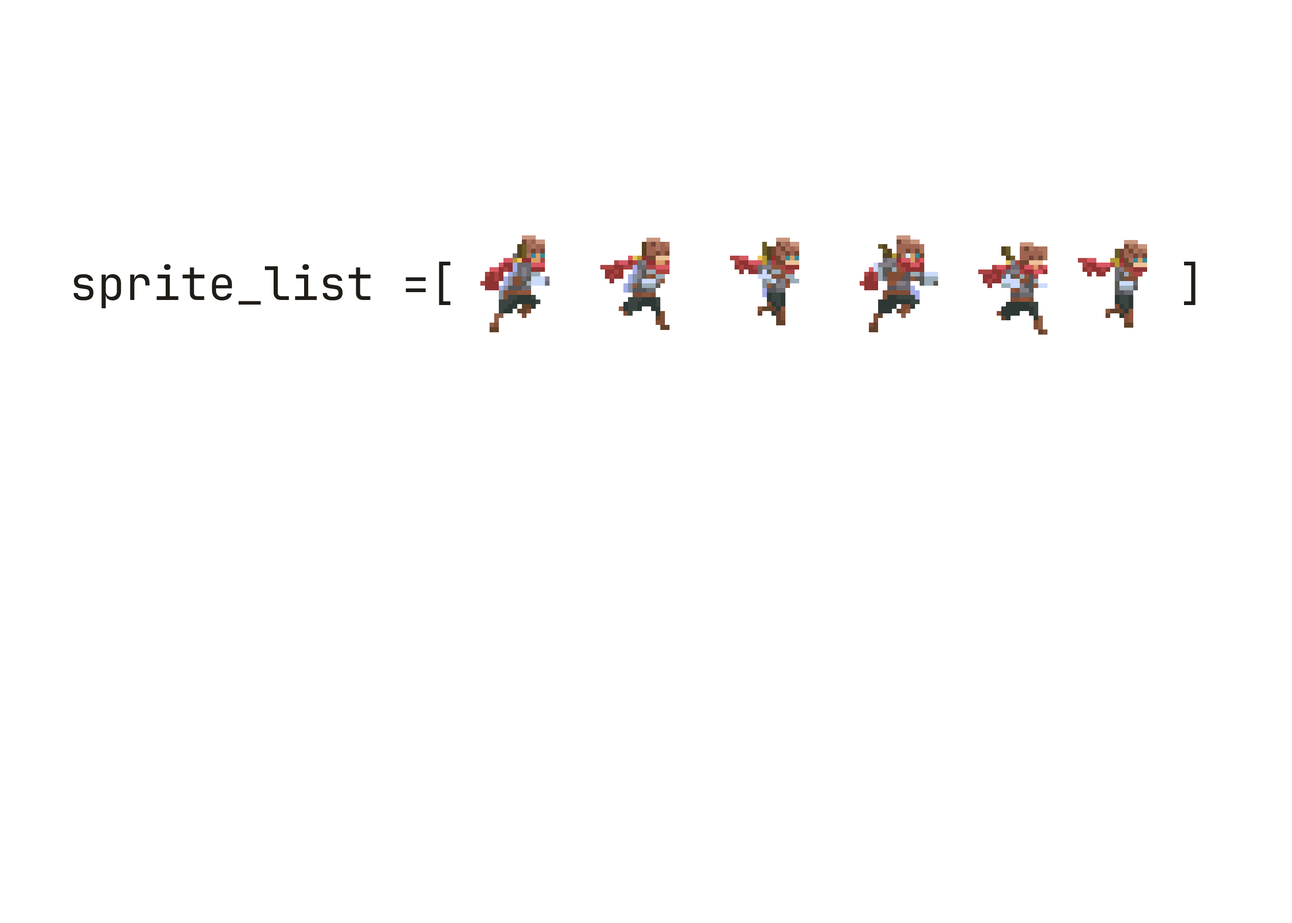
<style>
.page{position:relative;width:1292px;height:923px;background:#ffffff}
.page>*{position:absolute;margin:0}
.t1{font:46.1px "JetBrainsMono-Regular";color:#201c18}
</style>
<div class="page">
<p class="t1" style="left:73px;top:262px;width:1123px;height:46px">sprite_list =[                          ]</p>
</div>
